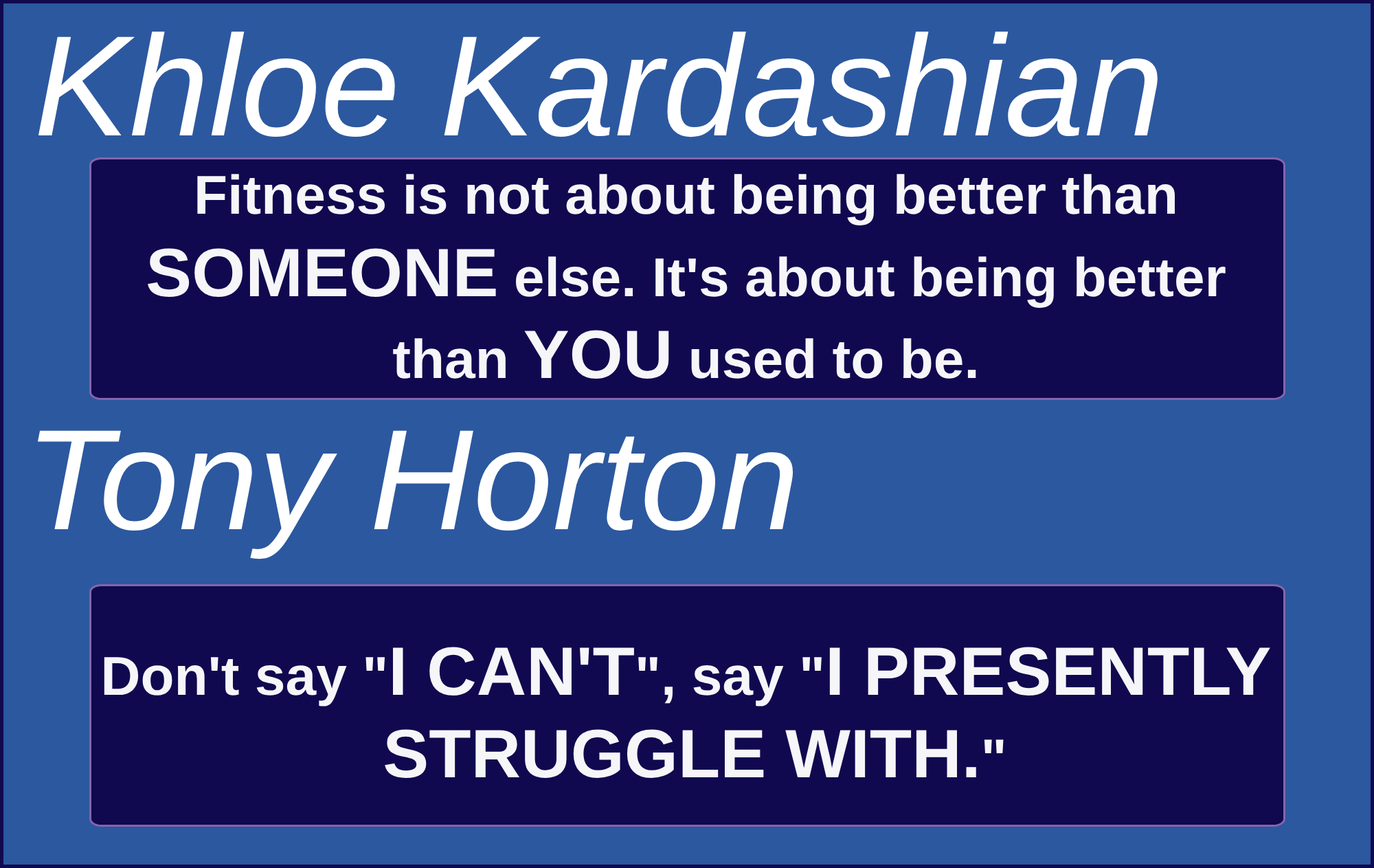
<style>
.page{position:relative;width:1374px;height:868px;background:#2c589f}
.page>*{position:absolute;margin:0}
.t1{font:143.1px "Arial-ItalicMT";color:#ffffff}
.t2{font:54.7px "Arial-BoldMT";color:#f6f6f9}
.t3{font:68.4px "Arial-BoldMT";color:#f6f6f9}
</style>
<div class="page">
<p class="t1" style="left:38px;top:32px;width:1120px;height:105px">Khloe Kardashian</p>
<p class="t2" style="left:148px;top:174px;width:1078px;height:205px;text-align:center">Fitness is not about being better than<br><span class="t3">SOMEONE </span>else. It's about being better<br>than <span class="t3">YOU </span>used to be.</p>
<p class="t1" style="left:38px;top:430px;width:756px;height:129px">Tony Horton</p>
<p class="t3" style="left:104px;top:647px;width:1166px;height:131px;text-align:center"><span class="t2">Don't say </span><span class="t2">"</span>I CAN'T<span class="t2">"</span><span class="t2">, say </span><span class="t2">"</span>I PRESENTLY <br>STRUGGLE WITH.<span class="t2">"</span></p>
</div>
